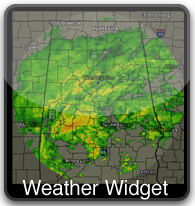
<style>
.page{position:relative;width:195px;height:206px}
.page>*{position:absolute;margin:0}
.t1{font:20.9px "Helvetica";color:#ffffff}
</style>
<div class="page">
<p class="t1" style="left:22px;top:180px;width:146px;height:20px">Weather Widget</p>
</div>
